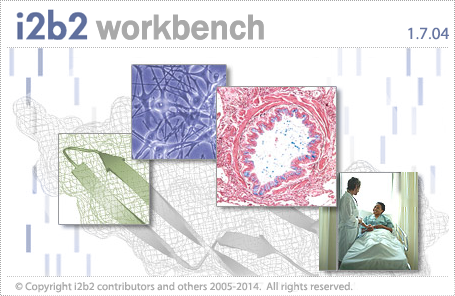
<style>
.page{position:relative;width:455px;height:296px;background:#ffffff}
.page>*{position:absolute;margin:0}
.t1{font:17px "MyriadPro-Regular";letter-spacing:0.008em;color:#6776a2}
.t2{font:11px "MyriadPro-Regular";letter-spacing:0.008em;color:#a9a9a9}
</style>
<div class="page">
<p class="t1" style="left:408px;top:27px;width:41px;height:13px">1.7.04</p>
<p class="t2" style="left:15px;top:282px;width:338px;height:11px">© Copyright i2b2 contributors and others 2005-2014.  All rights reserved.</p>
</div>
